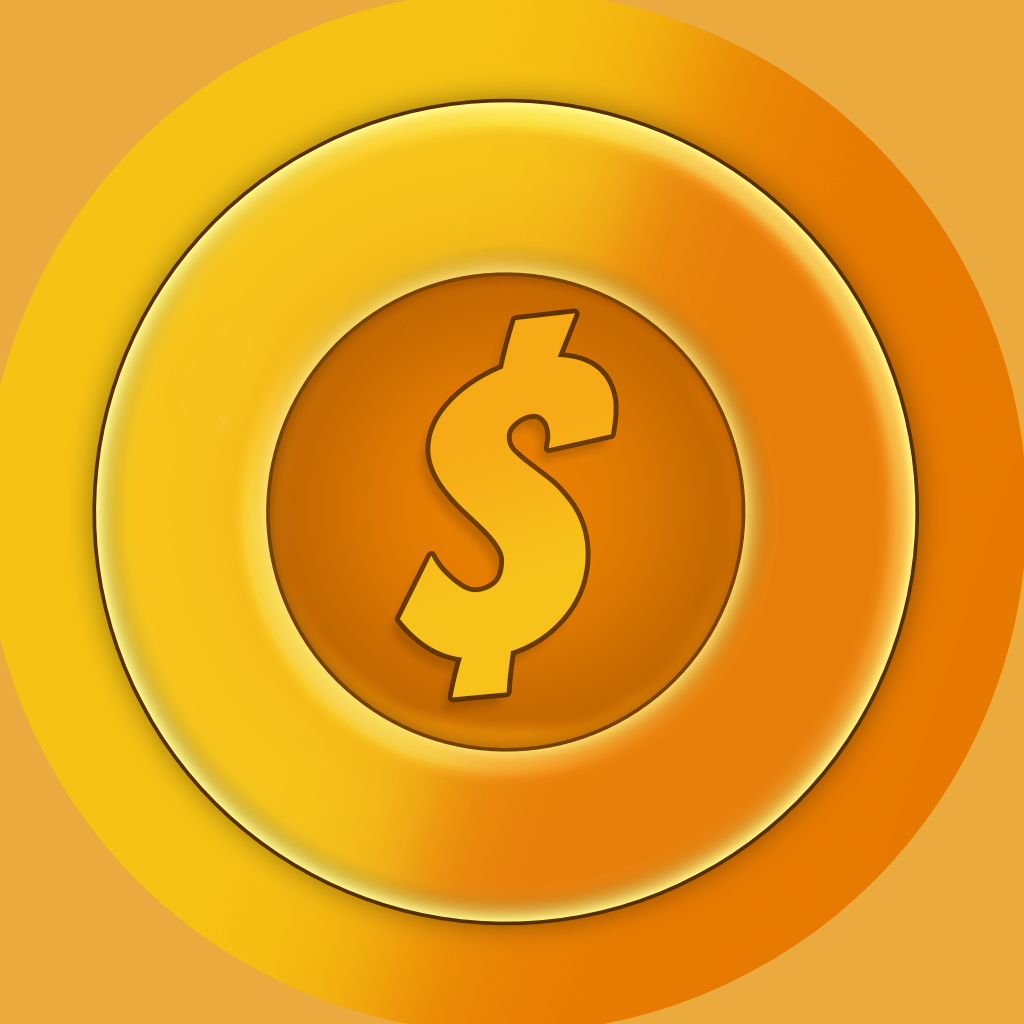
<style>
.page{position:relative;width:1024px;height:1024px}
.page>*{position:absolute;margin:0}
.t1{font:433.9px "Bangers-Regular";color:#f6c11a}
</style>
<div class="page">
<p class="t1" style="left:399px;top:313px;width:215px;height:385px">$</p>
</div>
